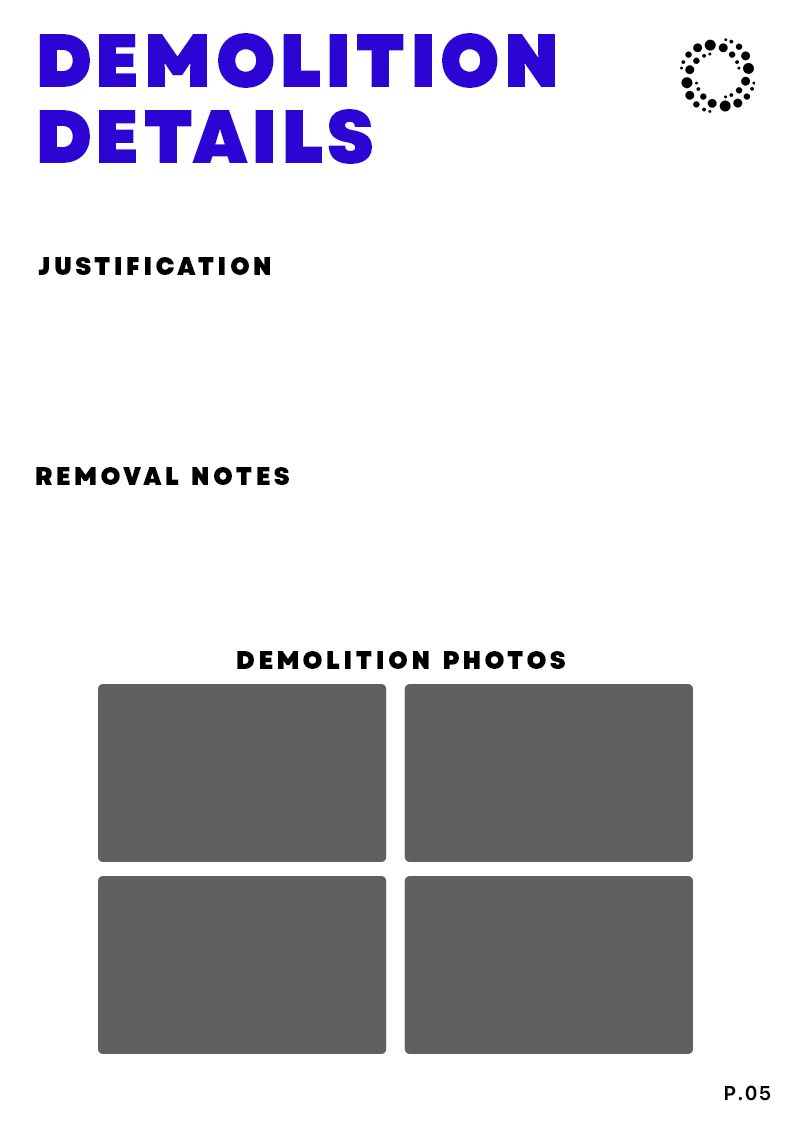
<style>
.page{position:relative;width:793px;height:1123px;background:#ffffff}
.page>*{position:absolute;margin:0}
.t1{font:75px/76px "Garet-Heavy";letter-spacing:0.05em;color:#2c05d4;text-transform:uppercase;scale:0.96 1}
.t2{font:25px "Garet-Heavy";letter-spacing:0.14em;color:#000000;text-transform:uppercase;scale:0.96 1}
.t3{font:20px "Galvji-Bold";letter-spacing:0.04em;color:#000000;scale:0.96 1}
</style>
<div class="page">
<p class="t1" style="left:39px;top:33px;width:516px;height:131px">DEMOLITION<br>DETAILS</p>
<p class="t2" style="left:38px;top:257px;width:232px;height:18px">justification</p>
<p class="t2" style="left:36px;top:467px;width:253px;height:18px">removal notes</p>
<p class="t2" style="left:237px;top:651px;width:328px;height:18px">demolition photos</p>
<p class="t3" style="left:725px;top:1085px;width:46px;height:16px">P.05</p>
</div>
